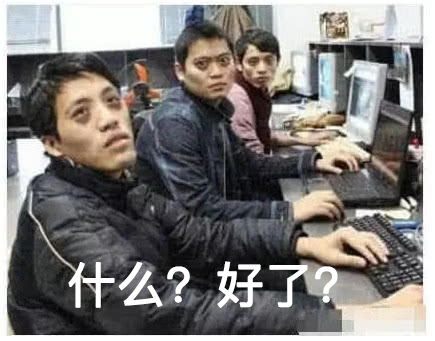
<style>
.page{position:relative;width:435px;height:341px}
.page>*{position:absolute;margin:0}
.t1{font:48px "PingFangSC-Regular";color:#ffffff;font-weight:bold}
</style>
<div class="page">
<p class="t1" style="left:68px;top:261px;width:270px;height:47px">什么？好了？</p>
</div>
